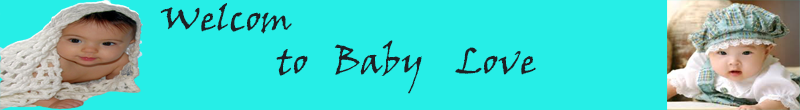
<style>
.page{position:relative;width:800px;height:110px;background:#26eee7}
.page>*{position:absolute;margin:0}
.t1{font:36px "VinerHandITC";color:#1e1f24}
</style>
<div class="page">
<p class="t1" style="left:160px;top:3px;width:376px;height:91px">Welcom<br>              to   Baby    Love</p>
</div>
